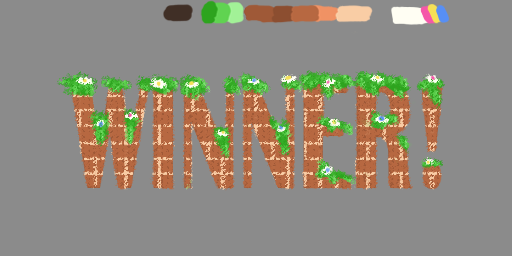
<style>
.page{position:relative;width:512px;height:256px;background:#8b8b8b}
.page>*{position:absolute;margin:0}
.t1{font:158.5px "BritannicBold";scale:0.63 1}
</style>
<div class="page">
<p class="t1" style="left:70px;top:80px;width:372px;height:109px">WINNER!</p>
</div>
